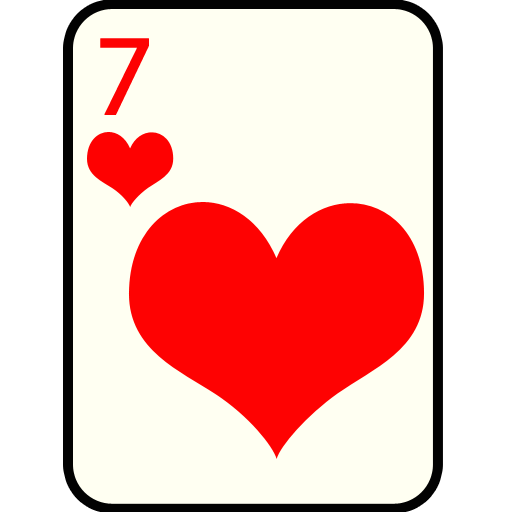
<style>
.page{position:relative;width:512px;height:512px;background:#fffff2}
.page>*{position:absolute;margin:0}
.t1{font:200px "MyriadPro-Regular";letter-spacing:-0.05em;color:#fd0202;font-variant:small-caps;font-weight:bold}
</style>
<div class="page">
<p class="t1" style="left:100px;top:38px;width:49px;height:77px">7</p>
</div>
